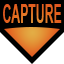
<style>
.page{position:relative;width:64px;height:64px;background:#000000}
.page>*{position:absolute;margin:0}
.t1{font:26.2px "ArialNarrow-Bold";letter-spacing:0.01em;color:#e36320;scale:0.56 1}
</style>
<div class="page">
<p class="t1" style="left:3px;top:4px;width:59px;height:19px">CAPTURE</p>
</div>
